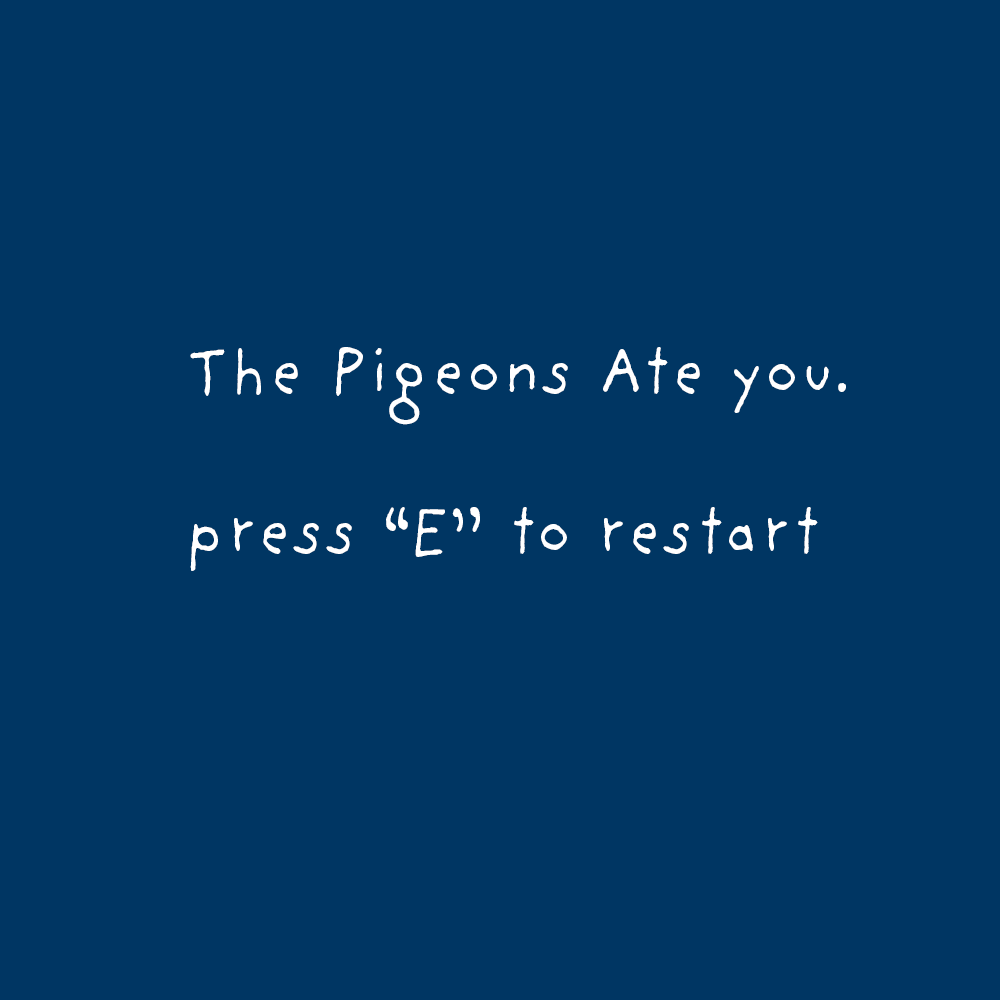
<style>
.page{position:relative;width:1000px;height:1000px;background:#003663}
.page>*{position:absolute;margin:0}
.t1{font:66.7px "ProvidenceSansPro";color:#ffffff}
</style>
<div class="page">
<p class="t1" style="left:190px;top:347px;width:656px;height:224px">The Pigeons Ate you. <br><br>press “E” to restart</p>
</div>
